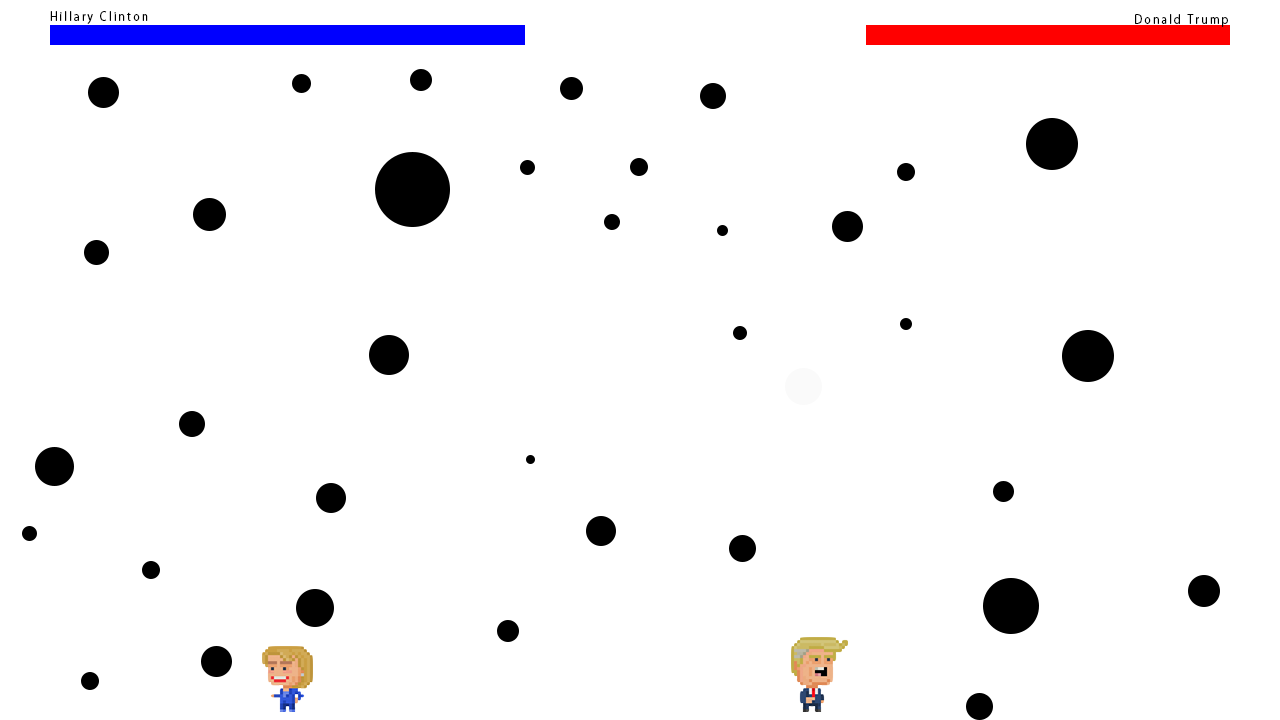
<style>
.page{position:relative;width:1280px;height:720px;background:#ffffff}
.page>*{position:absolute;margin:0}
.t1{font:12px "KozGoPr6N-Regular";letter-spacing:0.2em;color:#000000;scale:0.9 1}
</style>
<div class="page">
<p class="t1" style="left:50px;top:11px;width:98px;height:13px">Hillary Clinton</p>
<p class="t1" style="left:1135px;top:14px;width:93px;height:13px">Donald Trump</p>
</div>
